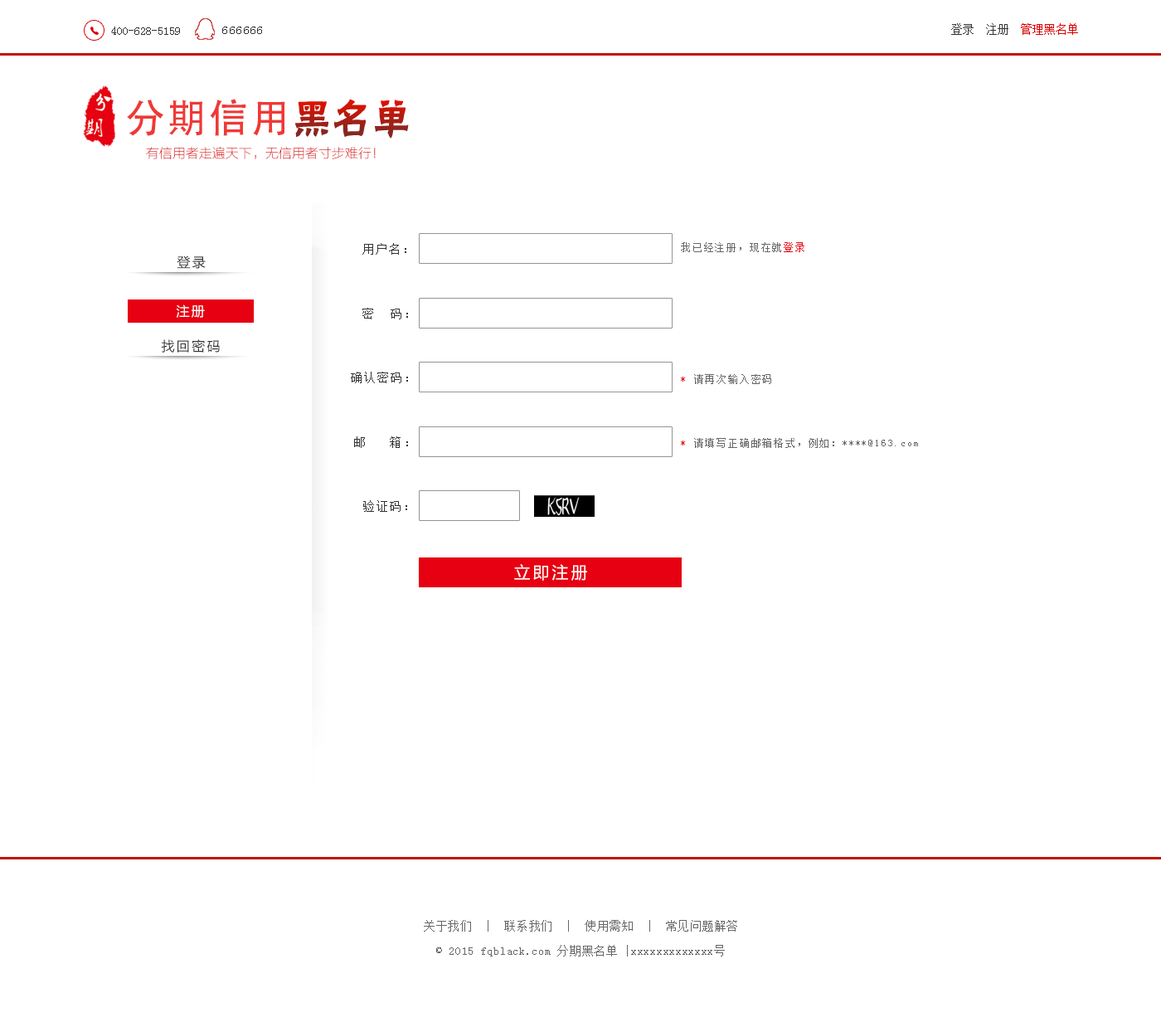
<style>
.page{position:relative;width:1161px;height:1027px;background:#ffffff}
.page>*{position:absolute;margin:0}
.t1{font:11.6px "SimSun";color:#333333}
.t2{font:11.6px "SimSun";color:#333333;font-weight:bold}
.t3{font:11.6px "SimSun";letter-spacing:0.1em;color:#333333}
.t4{font:11.6px "SimSun";color:#d90000}
.t5{font:39.8px "AdobeHeitiStd-Regular";letter-spacing:0.05em;color:#ef3936}
.t6{font:13.3px "FZLTCXHJW--GB1-0";color:#d90000}
.t7{font:11.6px "SimSun";letter-spacing:0.15em;color:#333333}
.t8{font:10px "SimSun";letter-spacing:0.15em;color:#666666}
.t9{font:10px "SimSun";letter-spacing:0.15em;color:#e60012}
.t10{font:13.3px "MicrosoftYaHei";letter-spacing:0.15em;color:#333333}
.t11{font:13.3px "MicrosoftYaHei";letter-spacing:0.15em;color:#ffffff}
.t12{font:16.6px "MicrosoftYaHei";letter-spacing:0.15em;color:#ffffff}
.t13{font:11.6px/24.9px "SimSun";letter-spacing:0.05em;color:#666666}
</style>
<div class="page">
<p class="t1" style="left:111px;top:27px;width:69px;height:8px"><span class="t2">     </span>400-628-5159</p>
<p class="t3" style="left:222px;top:27px;width:40px;height:7px">666666</p>
<p class="t1" style="left:951px;top:23px;width:127px;height:12px">登录  注册 <span class="t4"> 管理黑名单</span></p>
<p class="t5" style="left:127px;top:99px;width:158px;height:37px">分期信用</p>
<p class="t6" style="left:146px;top:146px;width:230px;height:13px">有信用者走遍天下，无信用者寸步难行！</p>
<p class="t7" style="left:362px;top:243px;width:44px;height:12px">用户名：</p>
<p class="t8" style="left:681px;top:242px;width:124px;height:10px">我已经注册，现在就<span class="t9">登录</span></p>
<p class="t10" style="left:177px;top:255px;width:29px;height:14px">登录</p>
<p class="t11" style="left:176px;top:304px;width:29px;height:14px">注册</p>
<p class="t7" style="left:362px;top:308px;width:46px;height:11px">密  码：</p>
<p class="t10" style="left:161px;top:339px;width:59px;height:14px">找回密码</p>
<p class="t7" style="left:351px;top:372px;width:57px;height:11px">确认密码：</p>
<p class="t8" style="left:681px;top:374px;width:90px;height:10px"><span class="t9">* </span>请再次输入密码</p>
<p class="t7" style="left:354px;top:436px;width:54px;height:12px">邮   箱：</p>
<p class="t8" style="left:681px;top:438px;width:237px;height:10px"><span class="t9">* </span>请填写正确邮箱格式，例如：****@163.com</p>
<p class="t7" style="left:363px;top:500px;width:44px;height:12px">验证码：</p>
<p class="t12" style="left:514px;top:564px;width:73px;height:17px">立即注册</p>
<p class="t13" style="left:424px;top:920px;width:313px;height:36px;text-align:center">关于我们  |  联系我们  |  使用需知  |  常见问题解答<br>© 2015 fqblack.com 分期黑名单 |xxxxxxxxxxxxx号</p>
</div>
